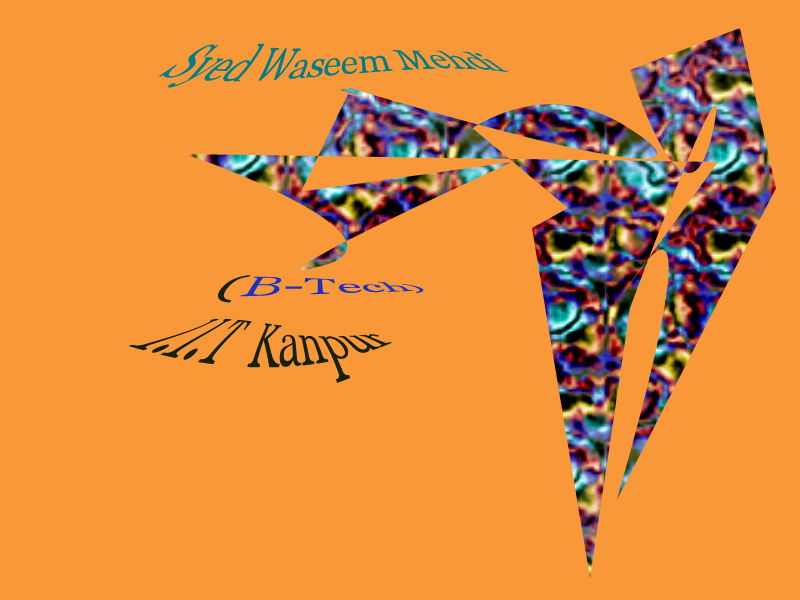
<style>
.page{position:relative;width:800px;height:600px;background:#f89839}
.page>*{position:absolute;margin:0}
.t1{font:36px "Georgia";color:#007d85}
.t2{font:36px "Georgia";color:#1c30c5}
.t3{font:36px "Georgia";color:#162005}
</style>
<div class="page">
<p class="t1" style="left:159px;top:43px;width:350px;height:45px">Syed Waseem Mehdi</p>
<p class="t2" style="left:218px;top:275px;width:206px;height:28px"><span class="t3"><br><br>         (</span>B-Tech)</p>
<p class="t3" style="left:128px;top:319px;width:264px;height:64px"><span class="t1">      </span>   I.I.T  Kanpur</p>
</div>
